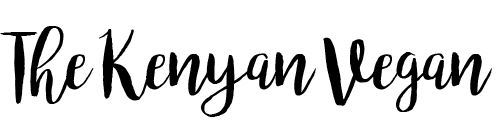
<style>
.page{position:relative;width:500px;height:130px;background:#ffffff}
.page>*{position:absolute;margin:0}
.t1{font:79.2px "bromello";color:#000000}
</style>
<div class="page">
<p class="t1" style="left:0px;top:26px;width:493px;height:91px">The Kenyan Vegan</p>
</div>
